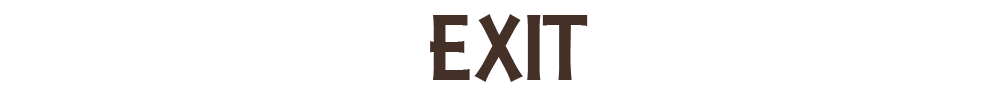
<style>
.page{position:relative;width:1000px;height:100px;background:#ffffff}
.page>*{position:absolute;margin:0}
.t1{font:100px "ARESSENCE";color:#453028}
</style>
<div class="page">
<p class="t1" style="left:430px;top:14px;width:158px;height:68px">EXIT</p>
</div>
